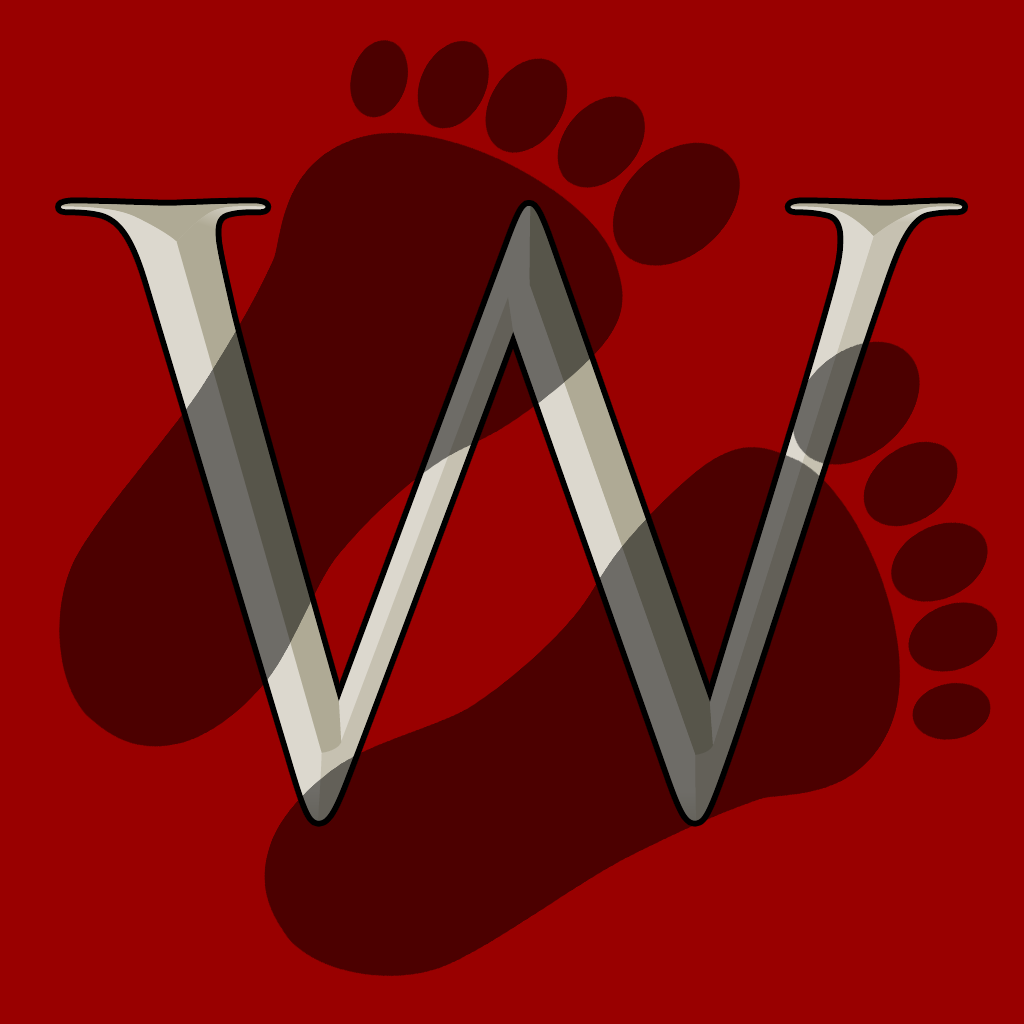
<style>
.page{position:relative;width:1024px;height:1024px;background:#990000}
.page>*{position:absolute;margin:0}
.t1{font:800px "TrajanColor-Concept";letter-spacing:0.18em}
</style>
<div class="page">
<p class="t1" style="left:61px;top:203px;width:902px;height:618px">W</p>
</div>
